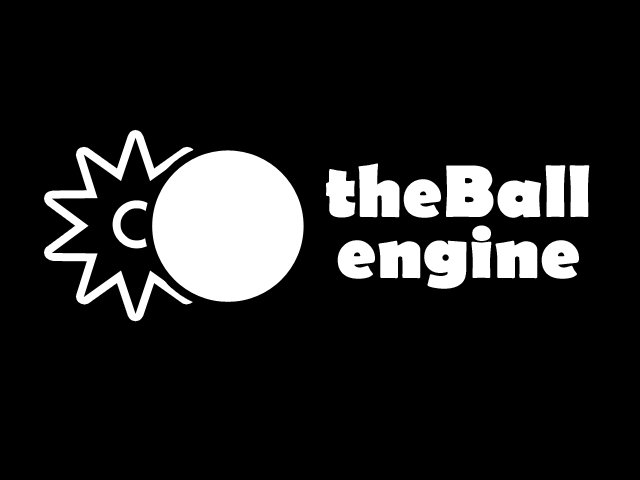
<style>
.page{position:relative;width:640px;height:480px;background:#000000}
.page>*{position:absolute;margin:0}
.t1{font:75.3px/60.2px "BerlinSansFB-Bold";color:#ffffff}
</style>
<div class="page">
<p class="t1" style="left:326px;top:163px;width:264px;height:126px;text-align:center">theBall<br>engine</p>
</div>
